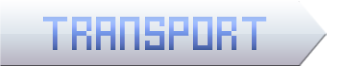
<style>
.page{position:relative;width:351px;height:66px}
.page>*{position:absolute;margin:0}
.t1{font:47.5px "HomespunTTBRK"}
</style>
<div class="page">
<p class="t1" style="left:43px;top:16px;width:224px;height:34px">TRANSPORT</p>
</div>
